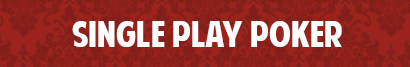
<style>
.page{position:relative;width:410px;height:67px}
.page>*{position:absolute;margin:0}
.t1{font:36px "AmericanPurpose";color:#ffffff}
</style>
<div class="page">
<p class="t1" style="left:72px;top:21px;width:270px;height:26px">SINGLE PLAY POKER</p>
</div>
